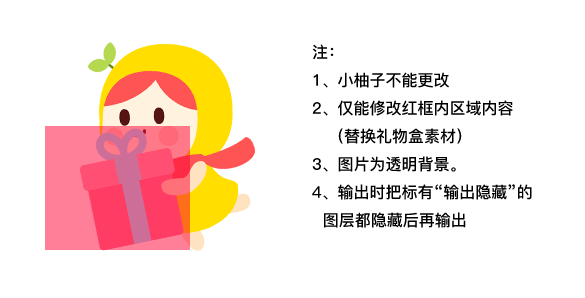
<style>
.page{position:relative;width:585px;height:298px;background:#ffffff}
.page>*{position:absolute;margin:0}
.t1{font:16px "PingFang-SC-Bold";color:#000000}
</style>
<div class="page">
<p class="t1" style="left:312px;top:44px;width:220px;height:184px">注：<br>1、小柚子不能更改<br>2、仅能修改红框内区域内容<br>   （替换礼物盒素材）<br>3、图片为透明背景。<br>4、输出时把标有“输出隐藏”的<br>  图层都隐藏后再输出</p>
</div>
